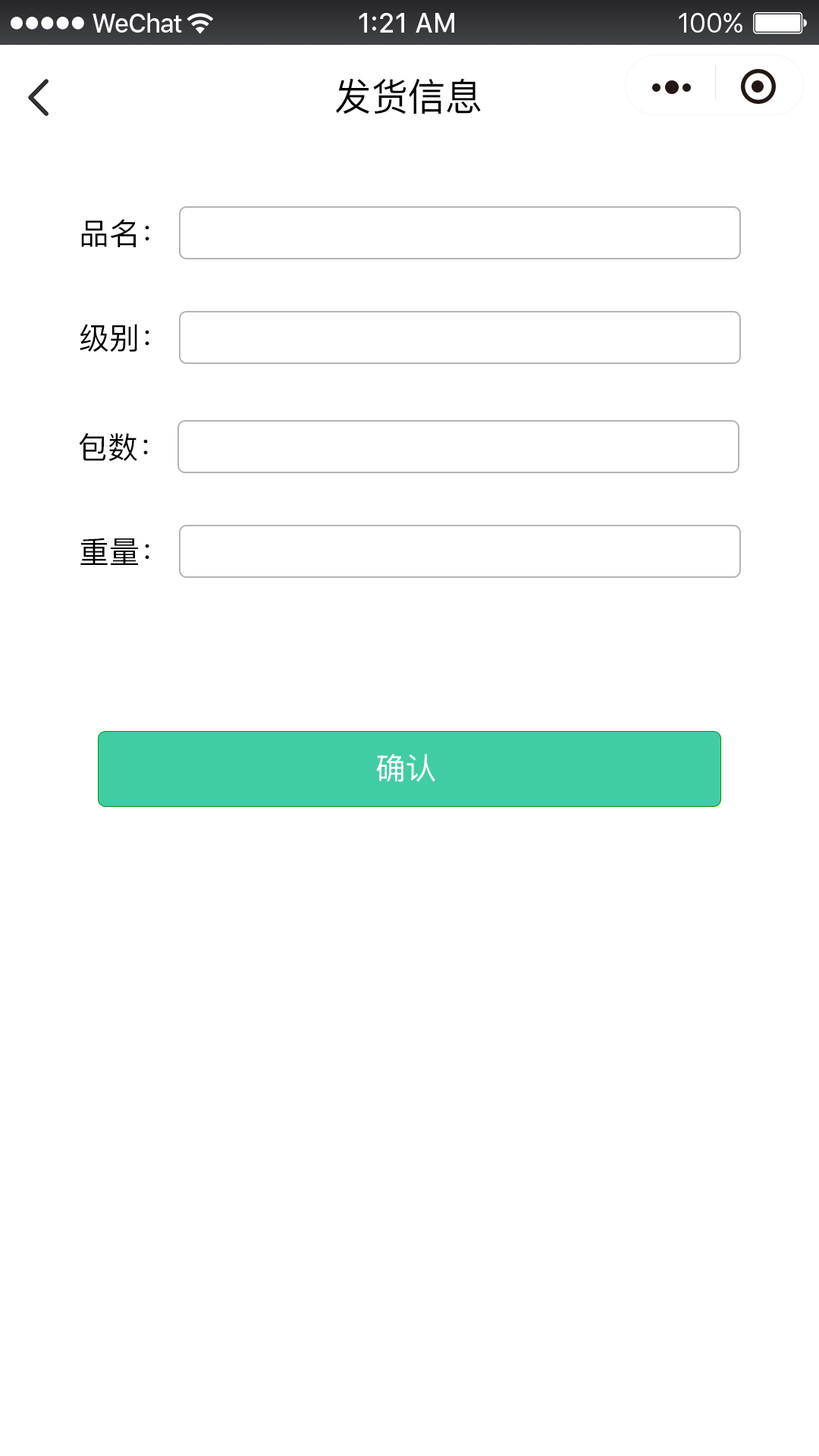
<style>
.page{position:relative;width:819px;height:1456px;background:#ffffff}
.page>*{position:absolute;margin:0}
.t1{font:37.9px "PingFangSC-Regular";color:#000000}
.t2{font:30.3px "PingFangSC-Regular";color:#000000}
.t3{font:30.3px "PingFangSC-Regular";color:#ffffff}
</style>
<div class="page">
<p class="t1" style="left:336px;top:78px;width:145px;height:37px">发货信息</p>
<p class="t2" style="left:81px;top:219px;width:68px;height:28px">品名：</p>
<p class="t2" style="left:80px;top:324px;width:69px;height:28px">级别：</p>
<p class="t2" style="left:79px;top:433px;width:69px;height:28px">包数：</p>
<p class="t2" style="left:80px;top:538px;width:69px;height:27px">重量：</p>
<p class="t3" style="left:376px;top:754px;width:59px;height:28px">确认</p>
</div>
